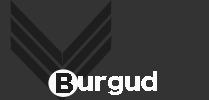
<style>
.page{position:relative;width:209px;height:100px;background:#333333}
.page>*{position:absolute;margin:0}
.t1{font:23.3px "HiraKakuStdN-W8";color:#1d1e1d}
.t2{font:23.3px "HiraKakuStdN-W8";color:#fbfbfb}
</style>
<div class="page">
<p class="t1" style="left:56px;top:73px;width:17px;height:20px">B</p>
<p class="t2" style="left:78px;top:71px;width:79px;height:24px">urgud</p>
</div>
